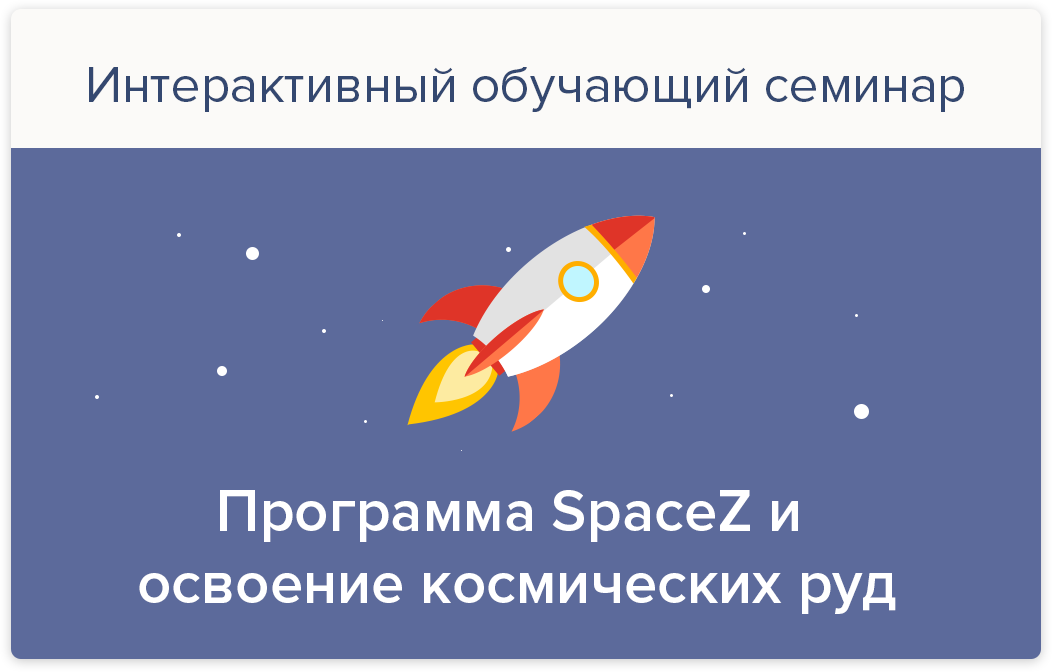
<style>
.page{position:relative;width:1052px;height:672px;background:#5c6a9b}
.page>*{position:absolute;margin:0}
.t1{font:52px "ProximaNova-Regular";color:#344870}
.t2{font:60px "ProximaNova-Semibold";color:#ffffff}
</style>
<div class="page">
<p class="t1" style="left:89px;top:67px;width:875px;height:45px">Интерактивный обучающий семинар</p>
<p class="t2" style="left:139px;top:490px;width:757px;height:124px;text-align:center">Программа SpaceZ и <br>освоение космических руд</p>
</div>
